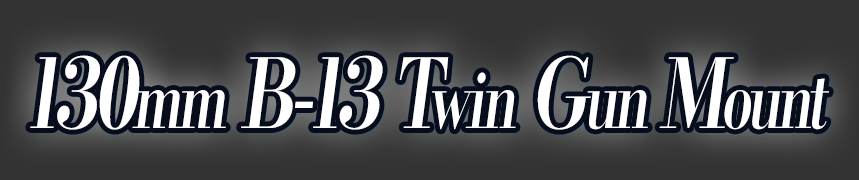
<style>
.page{position:relative;width:859px;height:180px;background:#333333}
.page>*{position:absolute;margin:0}
.t1{font:96px "KochoStd-Heavy";letter-spacing:-0.08em;color:#ffffff;font-style:italic;scale:0.74 1}
.t2{font:76.8px "KochoStd-Heavy";letter-spacing:-0.08em;color:#ffffff;font-style:italic;scale:0.74 1}
</style>
<div class="page">
<p class="t1" style="left:30px;top:55px;width:799px;height:75px">130<span class="t2">mm</span> B-13 T<span class="t2">win</span> G<span class="t2">un </span>M<span class="t2">ount</span></p>
</div>
